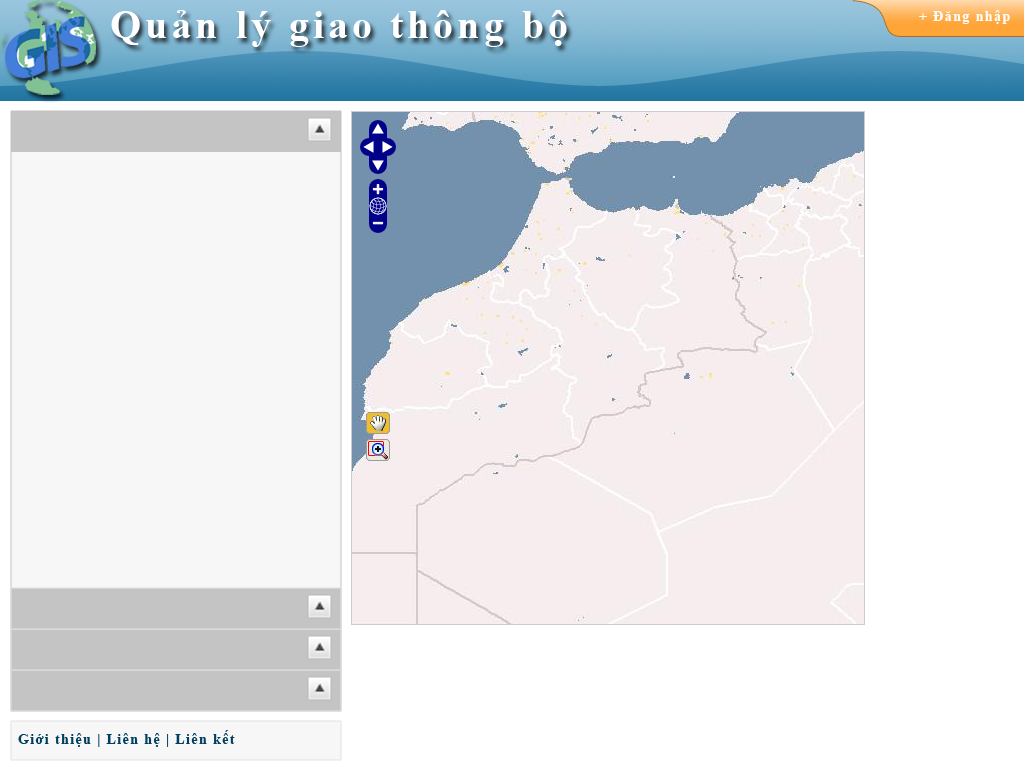
<style>
.page{position:relative;width:1024px;height:768px;background:#ffffff}
.page>*{position:absolute;margin:0}
.t1{font:40px "TimesNewRomanPS-BoldMT";letter-spacing:0.1em;color:#ffffff}
.t2{font:14px "TimesNewRomanPS-BoldMT";letter-spacing:0.1em;color:#ffffff}
.t3{font:14px "TimesNewRomanPS-BoldMT";letter-spacing:0.1em;color:#013f60}
</style>
<div class="page">
<p class="t1" style="left:111px;top:10px;width:456px;height:37px">Quản lý giao thông bộ</p>
<p class="t2" style="left:919px;top:10px;width:91px;height:14px">+ Đăng nhập</p>
<p class="t3" style="left:18px;top:730px;width:217px;height:17px">Giới thiệu | Liên hệ | Liên kết</p>
</div>
